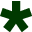
<style>
.page{position:relative;width:32px;height:32px;background:#003900}
.page>*{position:absolute;margin:0}
.t1{font:75px "HelveticaNeueLTStd-Blk";letter-spacing:0.06em;color:#003900}
</style>
<div class="page">
<p class="t1" style="left:0px;top:1px;width:33px;height:32px">*</p>
</div>
